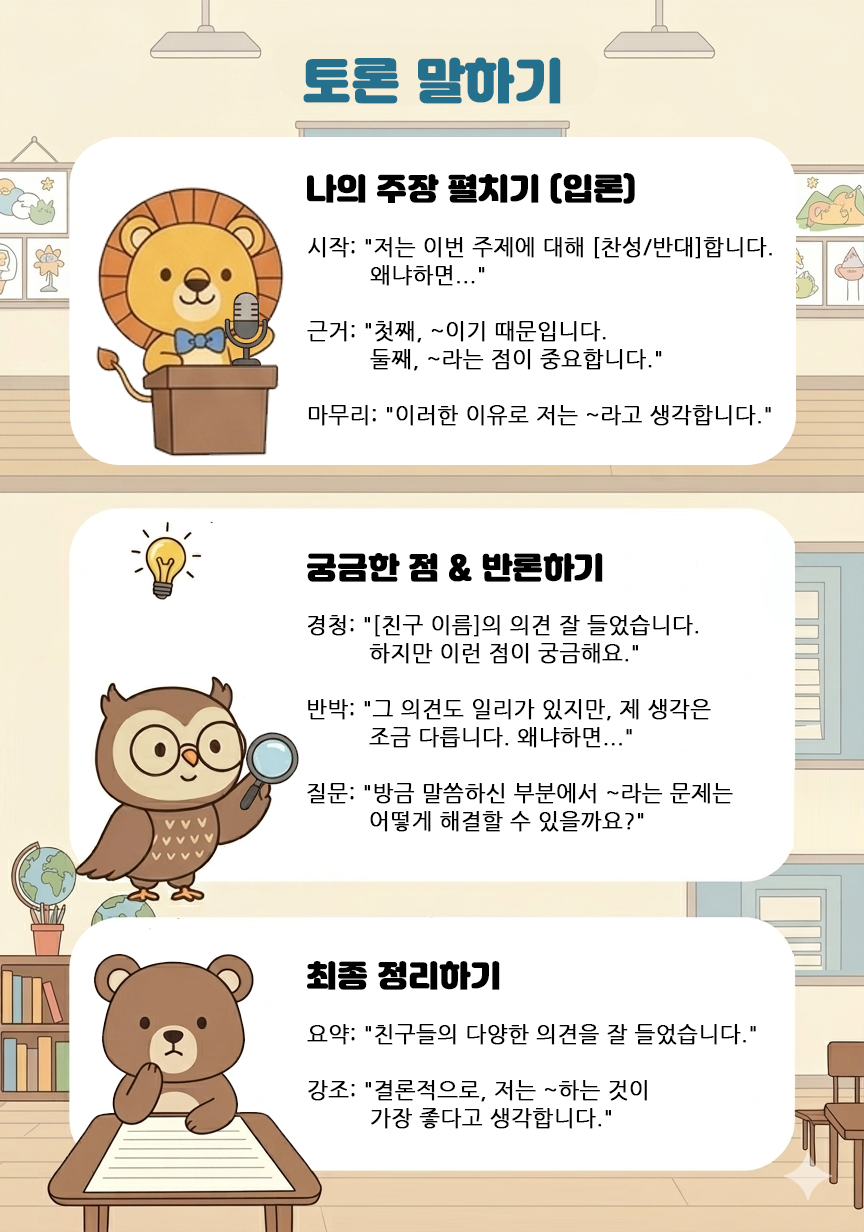
<style>
.page{position:relative;width:864px;height:1232px;background:#ffffff}
.page>*{position:absolute;margin:0}
.t1{font:48px "Jalnan2";color:#25718d;font-weight:bold}
.t2{font:30px "Jalnan2";color:#000000;font-weight:bold}
.t3{font:22px/28px "NanumGothic";color:#000000;font-weight:bold}
</style>
<div class="page">
<p class="t1" style="left:303px;top:57px;width:258px;height:47px">토론 말하기</p>
<p class="t2" style="left:307px;top:173px;width:328px;height:31px">나의 주장 펼치기 (입론)</p>
<p class="t3" style="left:307px;top:237px;width:465px;height:189px">시작: "저는 이번 주제에 대해 [찬성/반대]합니다. <br>     왜냐하면..." <br><br>근거: "첫째, ~이기 때문입니다. <br>     둘째, ~라는 점이 중요합니다." <br><br>마무리: "이러한 이유로 저는 ~라고 생각합니다."</p>
<p class="t2" style="left:307px;top:553px;width:296px;height:29px">궁금한 점 &amp; 반론하기</p>
<p class="t3" style="left:307px;top:615px;width:426px;height:217px">경청: "[친구 이름]의 의견 잘 들었습니다. <br>     하지만 이런 점이 궁금해요."<br><br>반박: "그 의견도 일리가 있지만, 제 생각은 <br>     조금 다릅니다. 왜냐하면..."<br><br>질문: "방금 말씀하신 부분에서 ~라는 문제는 <br>     어떻게 해결할 수 있을까요?"</p>
<p class="t2" style="left:307px;top:961px;width:193px;height:29px">최종 정리하기</p>
<p class="t3" style="left:307px;top:1024px;width:449px;height:105px">요약: "친구들의 다양한 의견을 잘 들었습니다."<br><br>강조: "결론적으로, 저는 ~하는 것이 <br>     가장 좋다고 생각합니다."</p>
</div>
